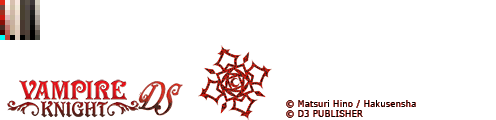
<style>
.page{position:relative;width:496px;height:120px;background:#ffffff}
.page>*{position:absolute;margin:0}
.t1{font:9px/10px "MeiryoUI";letter-spacing:0.05em;color:#000000;scale:0.92 1}
</style>
<div class="page">
<p class="t1" style="left:286px;top:100px;width:130px;height:18px">© Matsuri Hino / Hakusensha<br>© D3 PUBLISHER</p>
</div>
